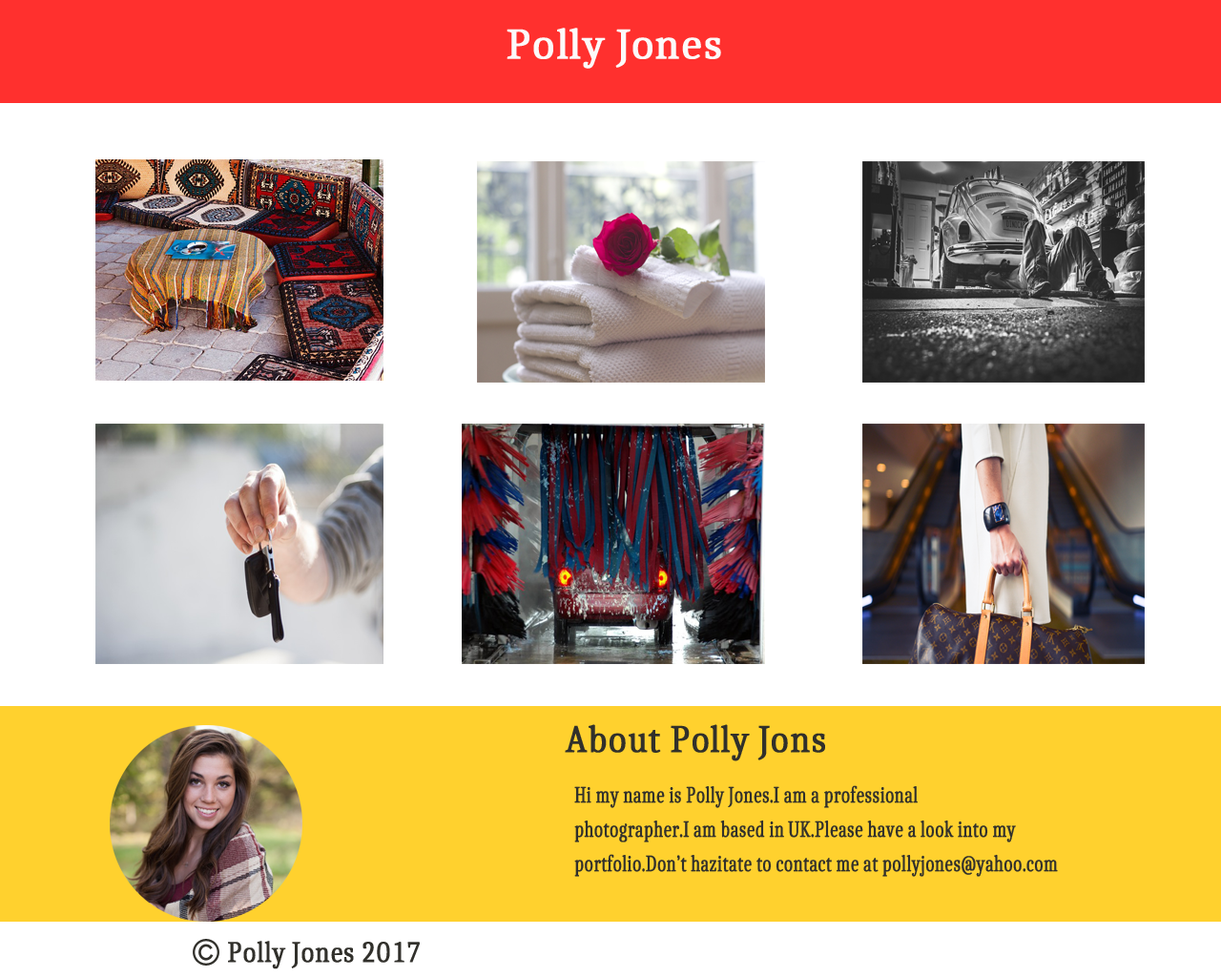
<style>
.page{position:relative;width:1221px;height:977px;background:#ffffff}
.page>*{position:absolute;margin:0}
.t1{font:43.5px "Caladea-Regular";color:#fcf9f9;font-weight:bold}
.t2{font:38.9px "Caladea-Regular";color:#31302b;font-weight:bold;scale:0.91 1}
.t3{font:23.3px/34.3px "Caladea-Regular";color:#31302b;font-weight:bold;scale:0.72 1}
.t4{font:29.9px "Caladea-Regular";color:#31302b;font-weight:bold;scale:0.86 1}
</style>
<div class="page">
<p class="t1" style="left:506px;top:28px;width:215px;height:41px">Polly Jones</p>
<p class="t2" style="left:565px;top:724px;width:260px;height:37px">About Polly Jons</p>
<p class="t3" style="left:574px;top:785px;width:484px;height:92px">Hi my name is Polly Jones.I am a professional <br>photographer.I am based in UK.Please have a look into my portfolio.Don’t hazitate to contact me at pollyjones@yahoo.com</p>
<p class="t4" style="left:228px;top:940px;width:192px;height:29px">Polly Jones 2017</p>
</div>
